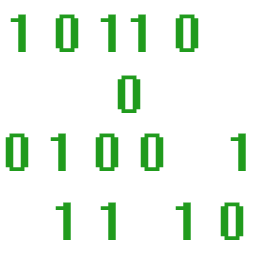
<style>
.page{position:relative;width:256px;height:256px;background:#ffffff}
.page>*{position:absolute;margin:0}
.t1{font:48px "System";color:#209b1d}
</style>
<div class="page">
<p class="t1" style="left:10px;top:14px;width:189px;height:38px">1 0 11 0</p>
<p class="t1" style="left:5px;top:75px;width:241px;height:96px;text-align:center">0<br>0 1 0 0    1</p>
<p class="t1" style="left:55px;top:202px;width:189px;height:38px">1 1   1 0</p>
</div>
